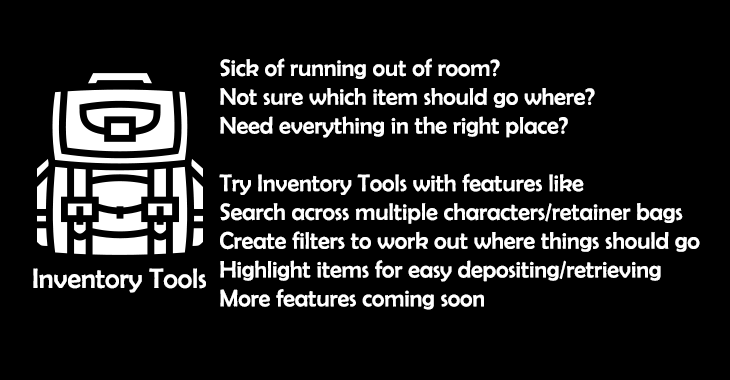
<style>
.page{position:relative;width:730px;height:380px;background:#000000}
.page>*{position:absolute;margin:0}
.t1{font:24px "BerlinSansFB-Reg";color:#ffffff}
.t2{font:28px "BerlinSansFB-Reg";color:#ffffff}
</style>
<div class="page">
<p class="t1" style="left:219px;top:58px;width:481px;height:252px">Sick of running out of room?<br>Not sure which item should go where?<br>Need everything in the right place?<br><br>Try Inventory Tools with features like<br>Search across multiple characters/retainer bags<br>Create filters to work out where things should go<br>Highlight items for easy depositing/retrieving<br>More features coming soon</p>
<p class="t2" style="left:33px;top:268px;width:173px;height:25px">Inventory Tools</p>
</div>
